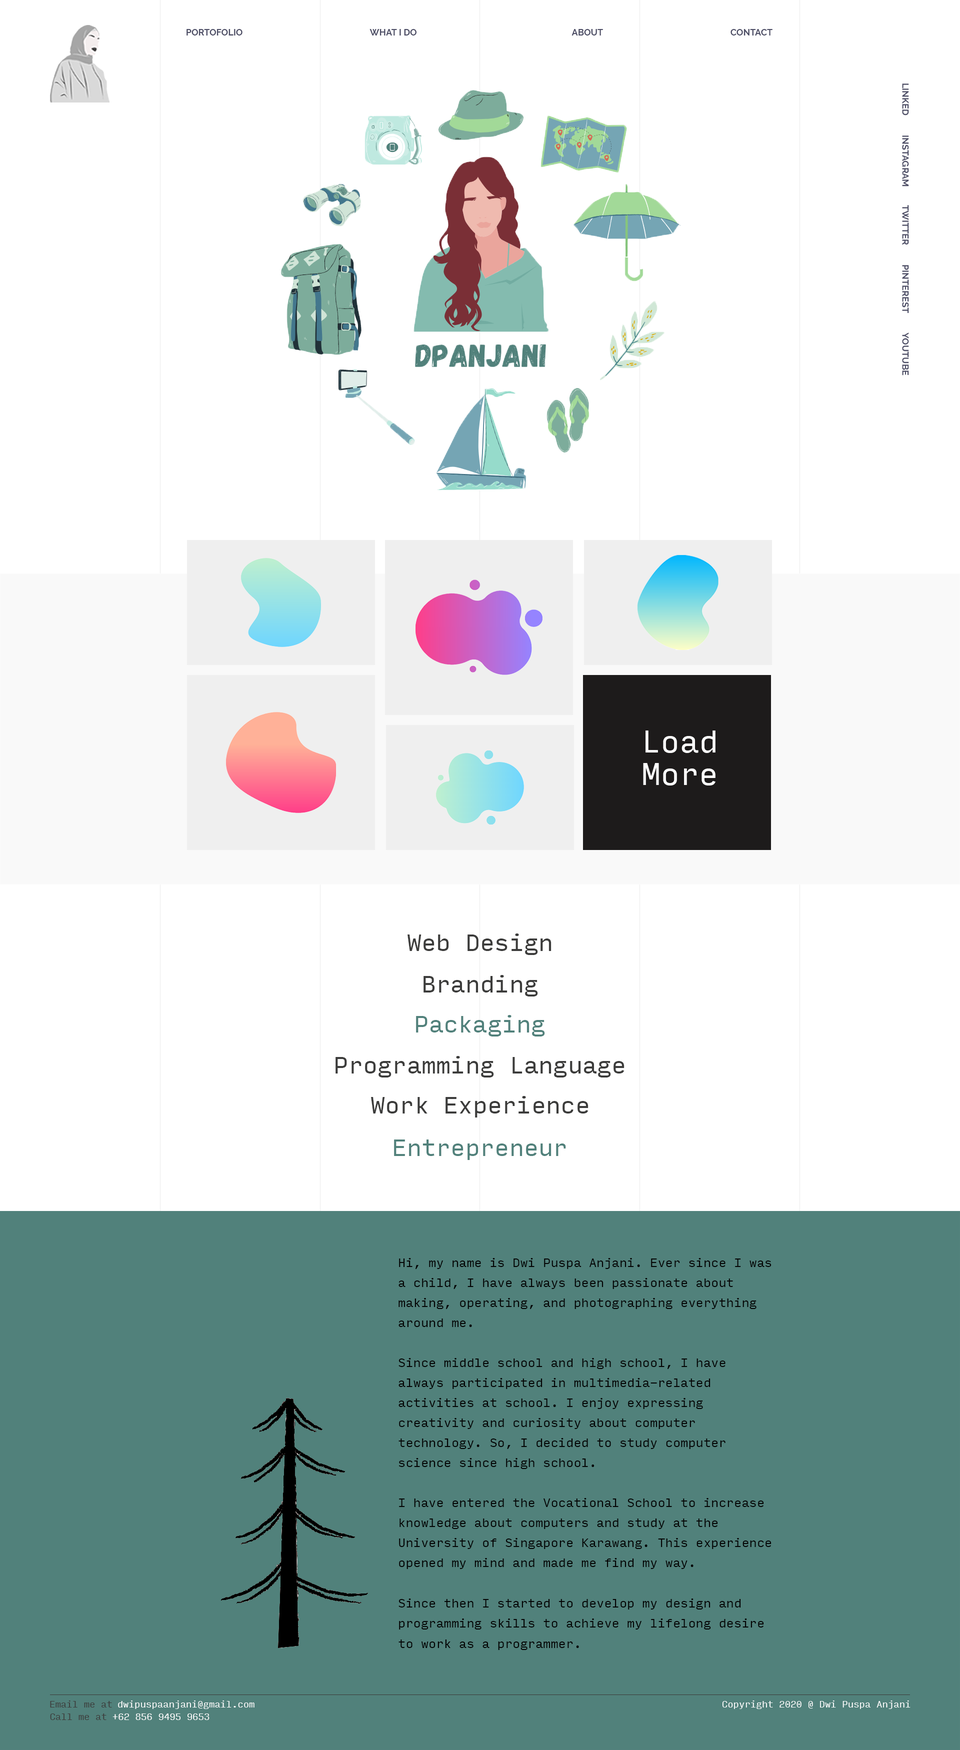
<style>
.page{position:relative;width:960px;height:1750px;background:#ffffff}
.page>*{position:absolute;margin:0}
.t1{font:9px "Raleway-Bold";color:#4d4e66}
.t2{font:30px/32.5px "InputMono-Regular";color:#ffffff}
.t3{font:23px "InputMono-Regular";color:#3c3c3b}
.t4{font:23px "InputMono-Regular";color:#51817b}
.t5{font:12px/20px "InputMono-Regular";color:#040404}
.t6{font:12px/20.3px "InputMono-Regular";color:#040404}
.t7{font:9px "InputMono-Regular";color:#3c3c3b}
.t8{font:9px "InputMono-Regular";color:#ffffff}
</style>
<div class="page">
<p class="t1" style="left:186px;top:29px;width:56px;height:7px">PORTOFOLIO</p>
<p class="t1" style="left:370px;top:29px;width:46px;height:7px">WHAT I DO</p>
<p class="t1" style="left:572px;top:29px;width:31px;height:7px">ABOUT</p>
<p class="t1" style="left:730px;top:29px;width:42px;height:7px">CONTACT</p>
<p class="t1" style="left:902px;top:84px;width:7px;height:32px;rotate:90deg">LINKED</p>
<p class="t1" style="left:902px;top:136px;width:7px;height:50px;rotate:90deg">INSTAGRAM</p>
<p class="t1" style="left:902px;top:205px;width:7px;height:40px;rotate:90deg">TWITTER</p>
<p class="t1" style="left:902px;top:265px;width:7px;height:48px;rotate:90deg">PINTEREST</p>
<p class="t1" style="left:902px;top:332px;width:7px;height:44px;rotate:90deg">YOUTUBE</p>
<p class="t2" style="left:643px;top:730px;width:73px;height:56px;text-align:center">Load<br>More</p>
<p class="t3" style="left:408px;top:934px;width:144px;height:21px">Web Design</p>
<p class="t3" style="left:424px;top:975px;width:114px;height:21px">Branding</p>
<p class="t4" style="left:416px;top:1015px;width:129px;height:21px">Packaging</p>
<p class="t3" style="left:336px;top:1056px;width:288px;height:22px">Programming Language</p>
<p class="t3" style="left:371px;top:1096px;width:217px;height:22px">Work Experience</p>
<p class="t4" style="left:394px;top:1140px;width:172px;height:20px">Entrepreneur</p>
<p class="t5" style="left:398px;top:1258px;width:374px;height:392px">Hi, my name is Dwi Puspa Anjani. Ever since I was a child, I have always been passionate about making, operating, and photographing everything around me.<br><br>Since middle school and high school, I have always participated in multimedia-related activities at school. I enjoy expressing creativity and curiosity about computer technology. So, I decided to study computer science since high school.<br><br>I have entered the Vocational School to increase knowledge about computers and study at the University of Singapore Karawang. This experience opened my mind and made me find my way.<br><br><span class="t6">Since then I started to develop my design and programming skills to achieve my lifelong desire to work as a programmer.</span></p>
<p class="t7" style="left:50px;top:1700px;width:62px;height:8px">Email me at</p>
<p class="t8" style="left:118px;top:1700px;width:136px;height:9px">dwipuspaanjani@gmail.com</p>
<p class="t8" style="left:722px;top:1700px;width:188px;height:9px">Copyright 2020 @ Dwi Puspa Anjani</p>
<p class="t7" style="left:50px;top:1714px;width:56px;height:6px">Call me at</p>
<p class="t8" style="left:112px;top:1714px;width:98px;height:6px">+62 856 9495 9653</p>
</div>
